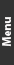
<style>
.page{position:relative;width:14px;height:65px;background:#333333}
.page>*{position:absolute;margin:0}
.t1{font:12px "MyriadPro-Bold";color:#fdfbfb}
</style>
<div class="page">
<p class="t1" style="left:2px;top:17px;width:9px;height:30px;rotate:-90deg">Menu</p>
</div>
